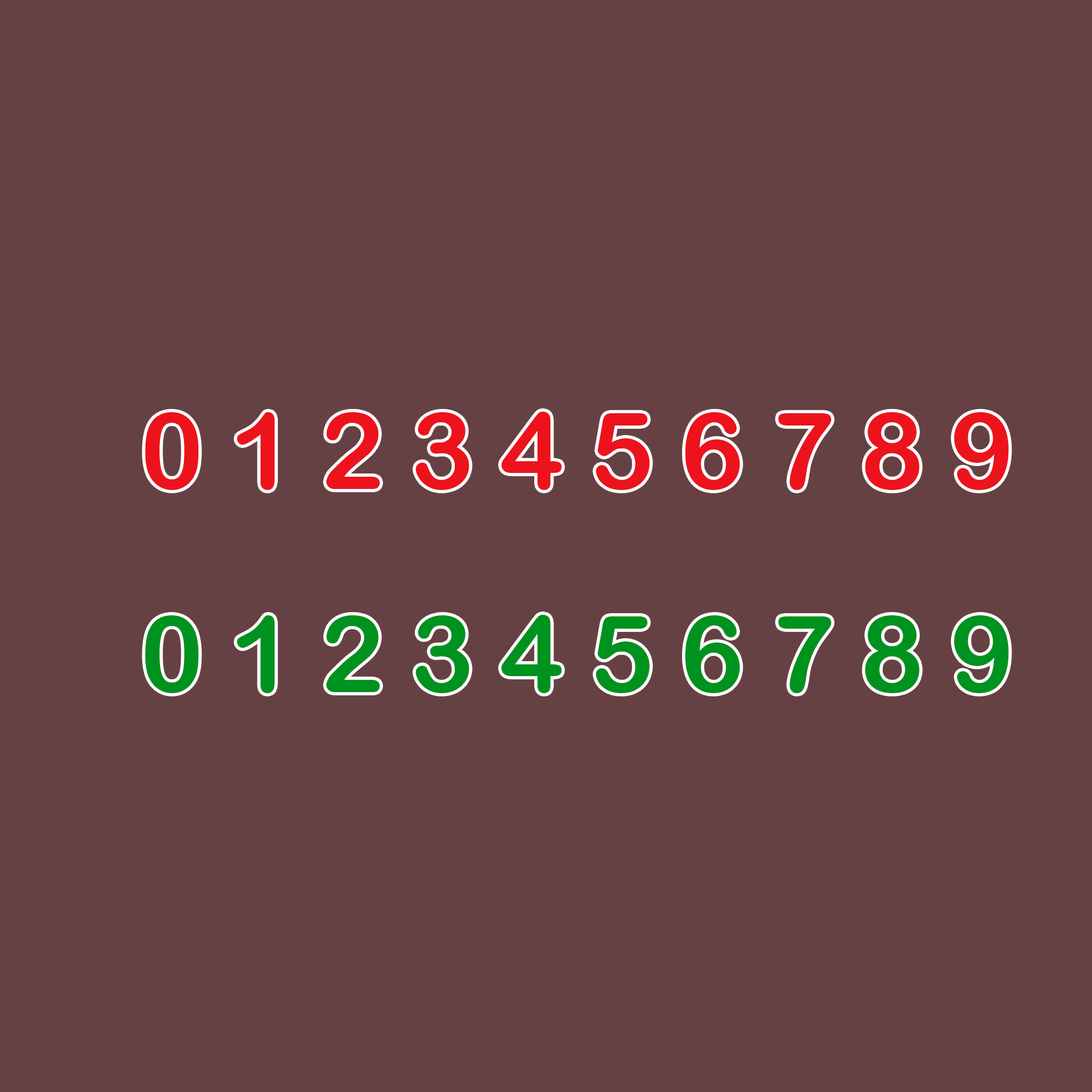
<style>
.page{position:relative;width:1092px;height:1092px;background:#664143}
.page>*{position:absolute;margin:0}
.t1{font:106.6px "ArialRoundedMTBold";color:#ec131c}
.t2{font:106.6px "ArialRoundedMTBold";color:#00921f}
</style>
<div class="page">
<p class="t1" style="left:145px;top:412px;width:864px;height:78px">0 1 2 3 4 5 6 7 8 9</p>
<p class="t2" style="left:145px;top:615px;width:864px;height:78px">0 1 2 3 4 5 6 7 8 9</p>
</div>
